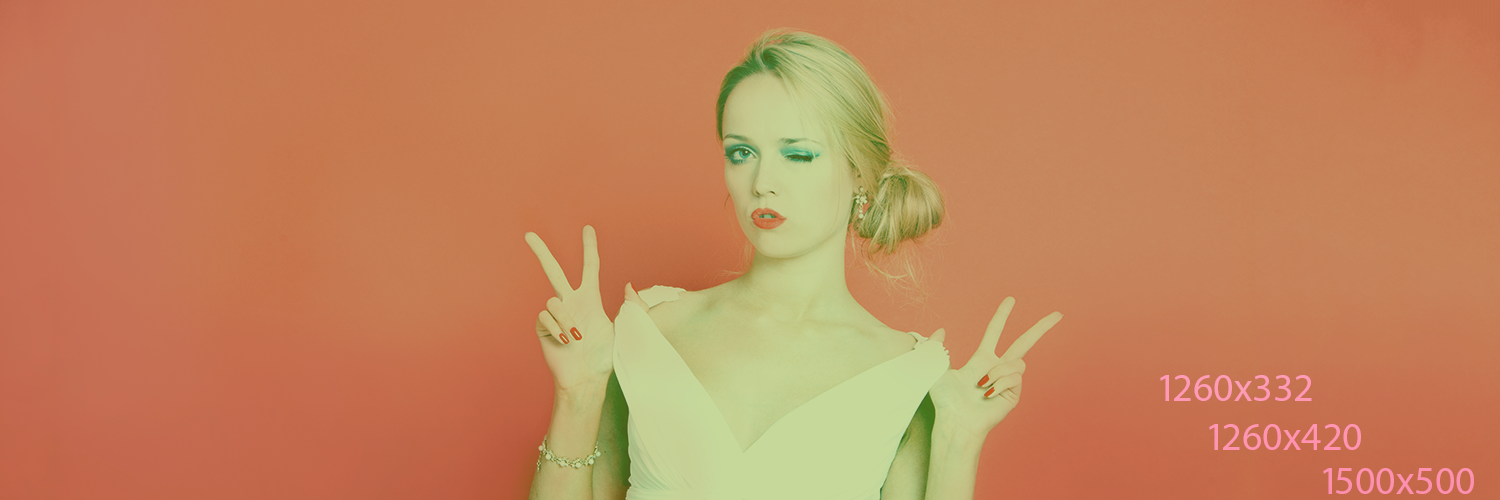
<style>
.page{position:relative;width:1500px;height:500px}
.page>*{position:absolute;margin:0}
.t1{font:40px "MyriadPro-Regular";color:#ff9ab5}
.t2{font:40px "MyriadPro-Regular";color:#ff94b0}
.t3{font:40px "MyriadPro-Regular";color:#fd90af}
</style>
<div class="page">
<p class="t1" style="left:1160px;top:375px;width:152px;height:26px">1260x332</p>
<p class="t2" style="left:1209px;top:424px;width:152px;height:26px">1260x420</p>
<p class="t3" style="left:1323px;top:468px;width:151px;height:26px">1500x500</p>
</div>
